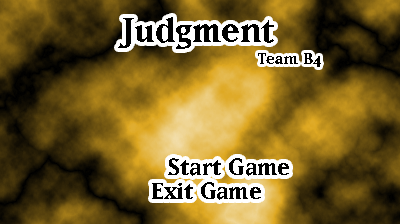
<style>
.page{position:relative;width:400px;height:224px}
.page>*{position:absolute;margin:0}
.t1{font:40px "Matrix-Bold";color:#000000}
.t2{font:18.7px "Matrix-Bold";color:#000000}
.t3{font:28px "Matrix-Bold";color:#000000}
</style>
<div class="page">
<p class="t1" style="left:118px;top:17px;width:156px;height:32px">Judgment</p>
<p class="t2" style="left:258px;top:53px;width:63px;height:14px">Team B4</p>
<p class="t3" style="left:168px;top:158px;width:121px;height:18px">Start Game</p>
<p class="t3" style="left:152px;top:182px;width:109px;height:18px">Exit Game</p>
</div>
